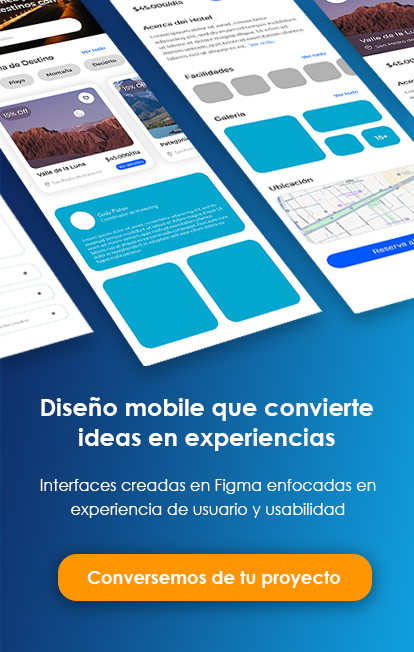
<style>
.page{position:relative;width:414px;height:652px}
.page>*{position:absolute;margin:0}
.t1{font:24px/30px "CenturyGothic-Bold";color:#ffffff}
.t2{font:16px/24px "CenturyGothic";color:#ffffff}
.t3{font:18px "CenturyGothic-Bold";color:#ffffff}
</style>
<div class="page">
<p class="t1" style="left:41px;top:397px;width:332px;height:54px;text-align:center">Diseño mobile que convierte ideas en experiencias</p>
<p class="t2" style="left:40px;top:479px;width:336px;height:39px;text-align:center">Interfaces creadas en Figma enfocadas en experiencia de usuario y usabilidad</p>
<p class="t3" style="left:87px;top:571px;width:253px;height:17px">Conversemos de tu proyecto</p>
</div>
